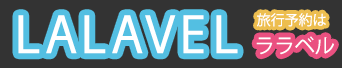
<style>
.page{position:relative;width:342px;height:68px;background:#333333}
.page>*{position:absolute;margin:0}
.t1{font:55px "AndaleMono";color:#ffffff}
.t2{font:14px "KozGoPr6N-Regular";color:#ffffff}
.t3{font:20px "KozGoPr6N-Regular";color:#ffffff}
</style>
<div class="page">
<p class="t1" style="left:18px;top:15px;width:220px;height:39px">LALAVEL</p>
<p class="t2" style="left:257px;top:13px;width:69px;height:14px">旅行予約は</p>
<p class="t3" style="left:256px;top:36px;width:78px;height:19px">ララベル</p>
</div>
